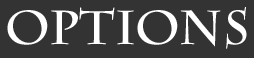
<style>
.page{position:relative;width:254px;height:58px;background:#333333}
.page>*{position:absolute;margin:0}
.t1{font:47.5px "CharlemagneStd-Bold";color:#ffffff}
</style>
<div class="page">
<p class="t1" style="left:7px;top:7px;width:240px;height:42px">OPTIONS</p>
</div>
